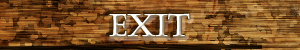
<style>
.page{position:relative;width:300px;height:50px}
.page>*{position:absolute;margin:0}
.t1{font:30px "Castellar";color:#ffffff;font-weight:bold}
</style>
<div class="page">
<p class="t1" style="left:109px;top:13px;width:81px;height:24px">Exit</p>
</div>
